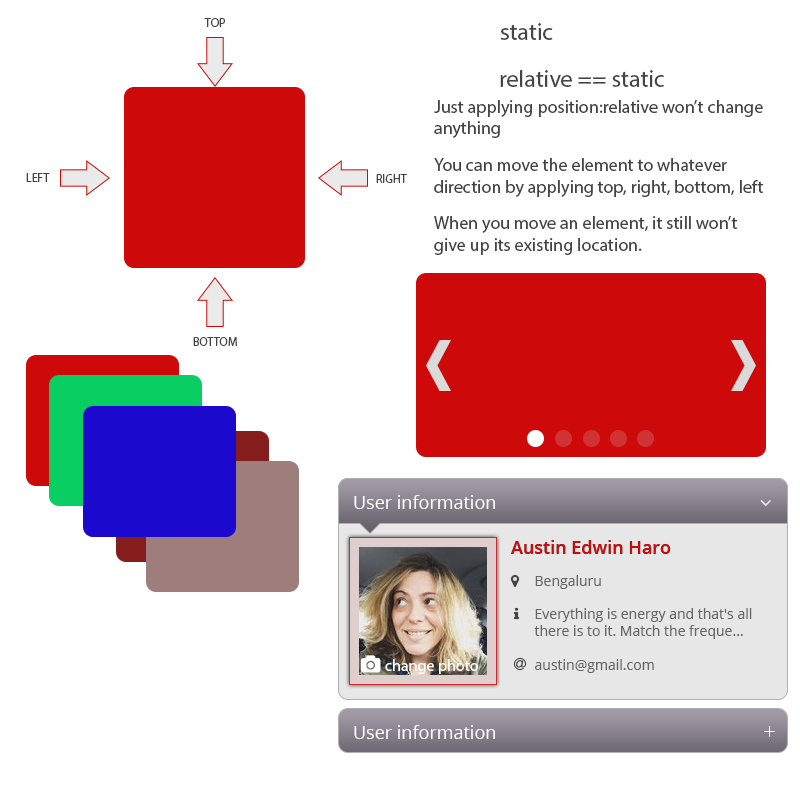
<style>
.page{position:relative;width:800px;height:800px;background:#ffffff}
.page>*{position:absolute;margin:0}
.t1{font:12px "MyriadPro-Regular";color:#444444}
.t2{font:24px "MyriadPro-Regular";color:#444444}
.t3{font:18px "MyriadPro-Regular";color:#444444}
.t4{font:18px "OpenSans";color:#fefefe}
.t5{font:18px "OpenSans-Semibold";color:#ce0909}
.t6{font:14px "OpenSans";color:#666666}
</style>
<div class="page">
<p class="t1" style="left:204px;top:18px;width:21px;height:9px">TOP</p>
<p class="t2" style="left:500px;top:23px;width:53px;height:17px">static</p>
<p class="t2" style="left:500px;top:70px;width:164px;height:17px">relative == static</p>
<p class="t3" style="left:434px;top:100px;width:330px;height:155px">Just applying position:relative won’t change anything <br>You can move the element to whatever direction by applying top, right, bottom, left<br>When you move an element, it still won’t give up its existing location.</p>
<p class="t1" style="left:26px;top:173px;width:24px;height:9px">LEFT</p>
<p class="t1" style="left:376px;top:174px;width:31px;height:9px">RIGHT</p>
<p class="t1" style="left:193px;top:337px;width:44px;height:9px">BOTTOM</p>
<p class="t4" style="left:354px;top:495px;width:141px;height:14px">User information</p>
<p class="t5" style="left:511px;top:540px;width:160px;height:14px">Austin Edwin Haro</p>
<p class="t5" style="left:511px;top:540px;width:160px;height:14px">Austin Edwin Haro</p>
<p class="t6" style="left:534px;top:575px;width:218px;height:98px">Bengaluru<br><br>Everything is energy and that's all there is to it. Match the freque...<br><br>austin@gmail.com</p>
<p class="t4" style="left:354px;top:725px;width:141px;height:14px">User information</p>
</div>
